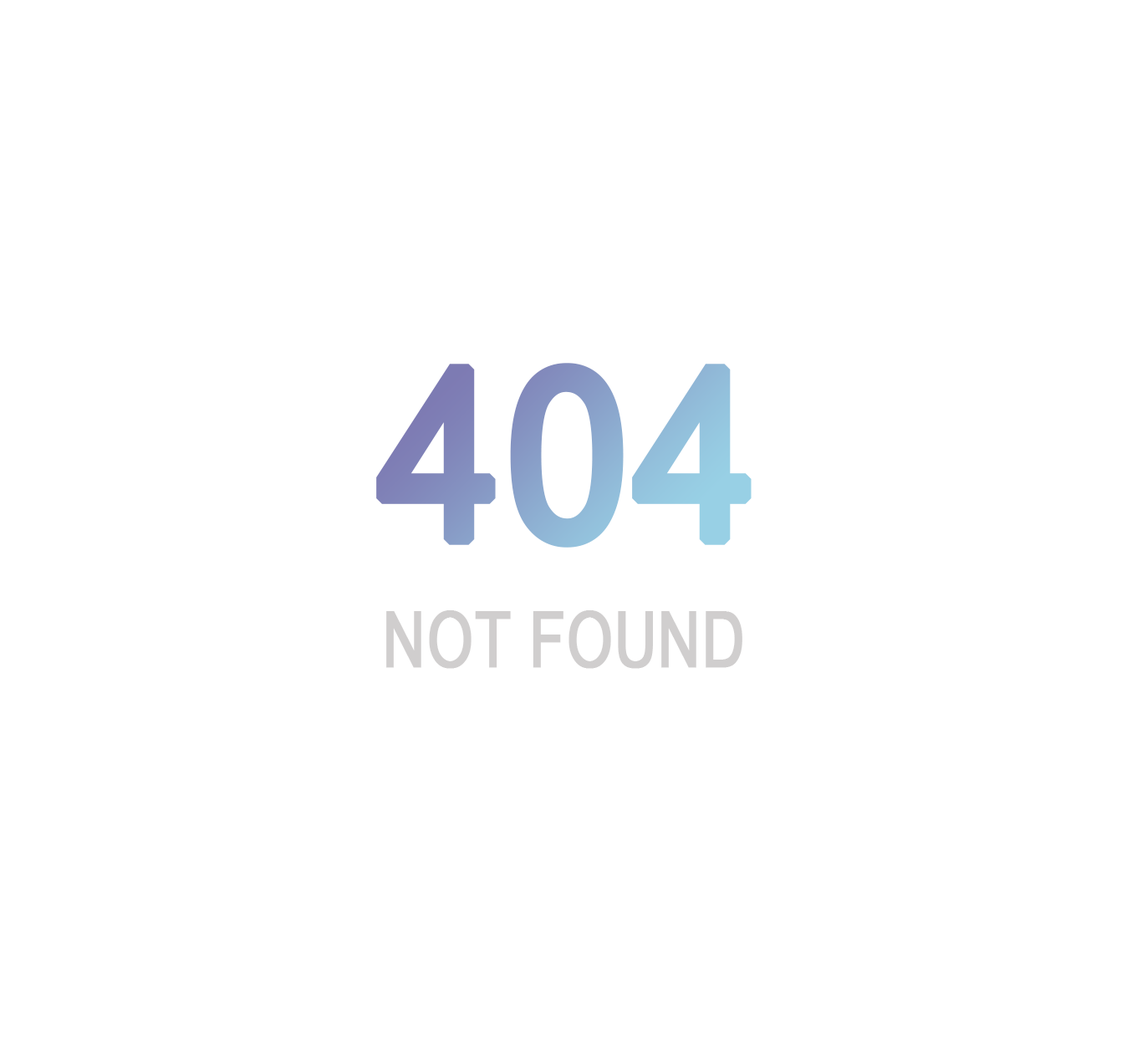
<style>
.page{position:relative;width:1142px;height:1045px;background:#ffffff}
.page>*{position:absolute;margin:0}
.t1{font:237.5px "ArialNarrow";font-weight:bold;scale:1.11 1}
.t2{font:76.9px "ArialNarrow";color:#d0cece;font-weight:bold;scale:0.92 1}
</style>
<div class="page">
<p class="t1" style="left:376px;top:363px;width:375px;height:184px">404</p>
<p class="t2" style="left:386px;top:610px;width:356px;height:59px">NOT FOUND</p>
</div>
